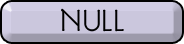
<style>
.page{position:relative;width:184px;height:44px;background:#cbc7dd}
.page>*{position:absolute;margin:0}
.t1{font:36px "PykesPeakZero";color:#000000}
</style>
<div class="page">
<p class="t1" style="left:61px;top:8px;width:63px;height:24px">NULL</p>
</div>
